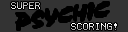
<style>
.page{position:relative;width:128px;height:32px;background:#333333}
.page>*{position:absolute;margin:0}
.t1{font:8px "Terminal"}
</style>
<div class="page">
<p class="t1" style="left:11px;top:2px;width:29px;height:7px">SUPER</p>
<p class="t1" style="left:71px;top:23px;width:46px;height:7px">SCORING!</p>
</div>
